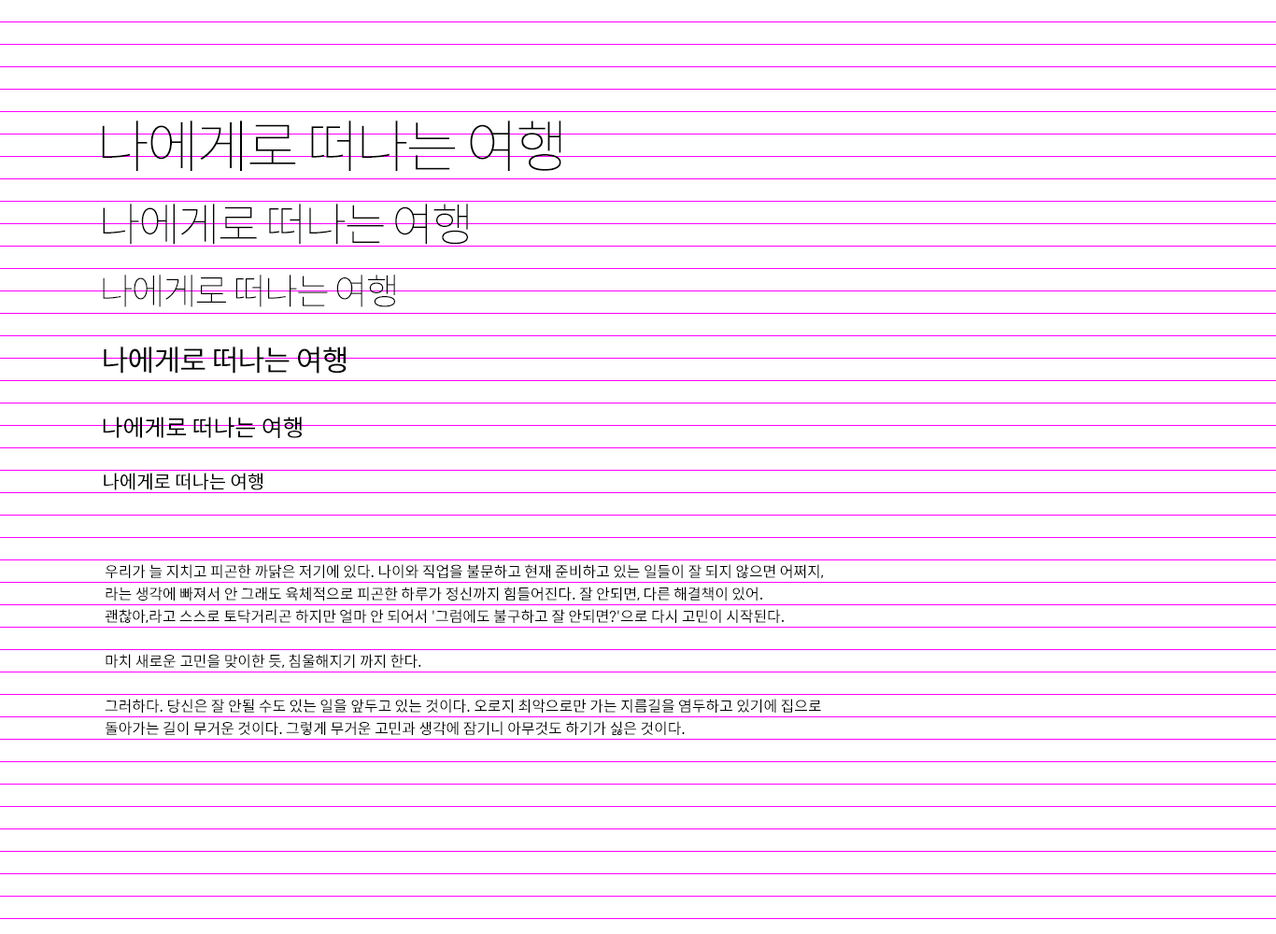
<style>
.page{position:relative;width:1276px;height:934px;background:#ffffff}
.page>*{position:absolute;margin:0}
.t1{font:57px "SpoqaHanSans-Thin";letter-spacing:-0.045em;color:#000000}
.t2{font:45.6px "SpoqaHanSans-Thin";letter-spacing:-0.05em;color:#000000}
.t3{font:36.5px "SpoqaHanSans-Thin";letter-spacing:-0.05em;color:#000000}
.t4{font:29.2px "SpoqaHanSans-Regular";letter-spacing:-0.025em;color:#000000}
.t5{font:23.4px "SpoqaHanSans-Regular";letter-spacing:-0.005em;color:#000000}
.t6{font:18.7px "SpoqaHanSans-Regular";letter-spacing:-0.005em;color:#000000}
.t7{font:14.9px "SpoqaHanSans-Regular";letter-spacing:-0.005em;color:#010101}
</style>
<div class="page">
<p class="t1" style="left:102px;top:121px;width:460px;height:50px">나에게로 떠나는 여행</p>
<p class="t2" style="left:103px;top:204px;width:365px;height:41px">나에게로 떠나는 여행</p>
<p class="t3" style="left:103px;top:275px;width:292px;height:32px">나에게로 떠나는 여행</p>
<p class="t4" style="left:104px;top:347px;width:243px;height:27px">나에게로 떠나는 여행</p>
<p class="t5" style="left:103px;top:417px;width:199px;height:21px">나에게로 떠나는 여행</p>
<p class="t6" style="left:104px;top:473px;width:159px;height:18px">나에게로 떠나는 여행</p>
<p class="t7" style="left:105px;top:564px;width:719px;height:171px">우리가 늘 지치고 피곤한 까닭은 저기에 있다. 나이와 직업을 불문하고 현재 준비하고 있는 일들이 잘 되지 않으면 어쩌지, 라는 생각에 빠져서 안 그래도 육체적으로 피곤한 하루가 정신까지 힘들어진다. 잘 안되면, 다른 해결책이 있어. 괜찮아,라고 스스로 토닥거리곤 하지만 얼마 안 되어서 '그럼에도 불구하고 잘 안되면?'으로 다시 고민이 시작된다.<br>마치 새로운 고민을 맞이한 듯, 침울해지기 까지 한다.<br>그러하다. 당신은 잘 안될 수도 있는 일을 앞두고 있는 것이다. 오로지 최악으로만 가는 지름길을 염두하고 있기에 집으로 돌아가는 길이 무거운 것이다. 그렇게 무거운 고민과 생각에 잠기니 아무것도 하기가 싫은 것이다.</p>
</div>
